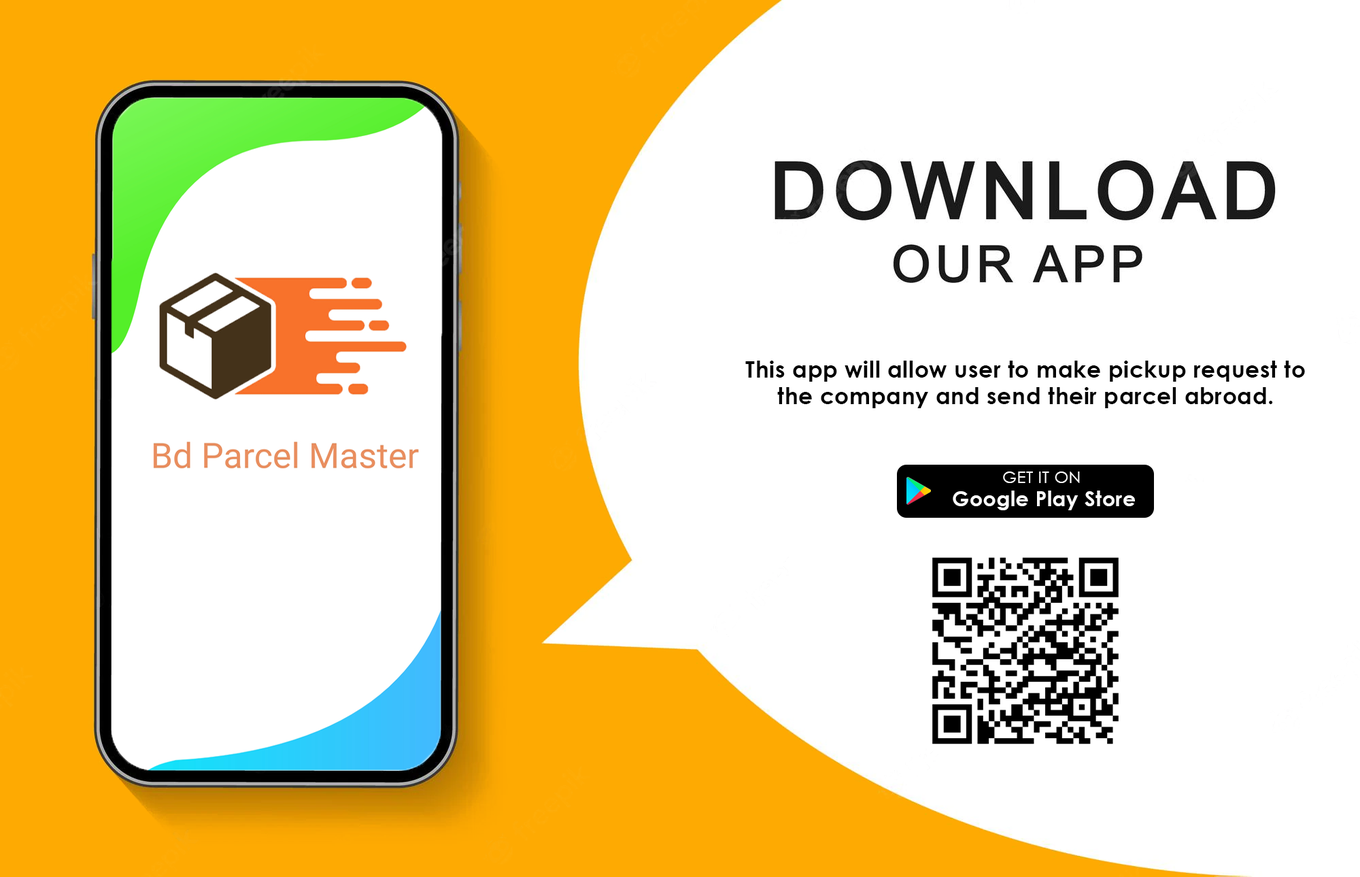
<style>
.page{position:relative;width:1360px;height:877px;background:#ffffff}
.page>*{position:absolute;margin:0}
.t1{font:22.4px "CenturyGothic-Bold";letter-spacing:0.02em;color:#000000}
.t2{font:16.3px "CenturyGothic";letter-spacing:0.02em;color:#ffffff}
.t3{font:20.4px "CenturyGothic-Bold";letter-spacing:0.02em;color:#ffffff}
</style>
<div class="page">
<p class="t1" style="left:745px;top:360px;width:560px;height:48px;text-align:center">This app will allow user to make pickup request to the company and send their parcel abroad.</p>
<p class="t2" style="left:1003px;top:471px;width:77px;height:12px">GET IT ON</p>
<p class="t3" style="left:953px;top:490px;width:182px;height:20px">Google Play Store</p>
</div>
